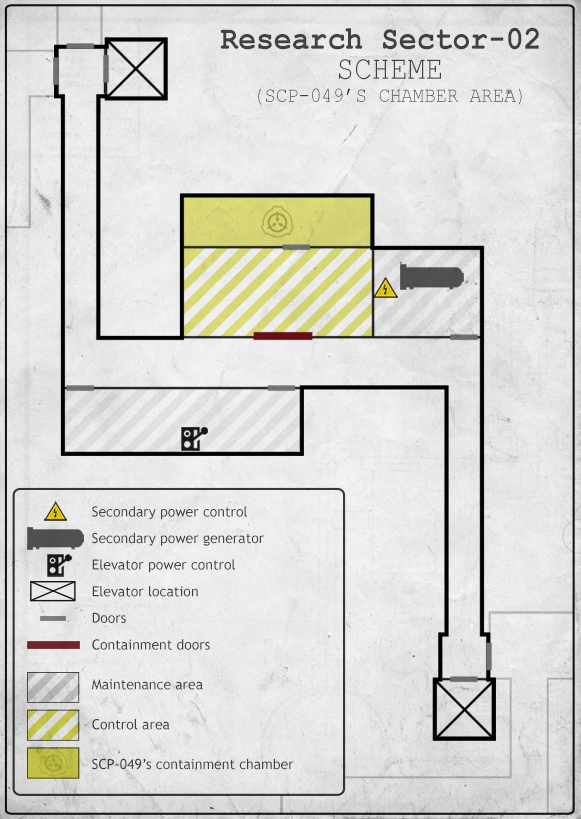
<style>
.page{position:relative;width:581px;height:819px}
.page>*{position:absolute;margin:0}
.t1{font:21.3px/23.1px "CourierNewPSMT";color:#414141;text-transform:uppercase;scale:0.89 1}
.t2{font:33.2px/30.1px "CourierNewPS-BoldMT";color:#414141;scale:0.89 1}
.t3{font:33.2px/30.1px "CourierNewPSMT";color:#414141;text-transform:uppercase;scale:0.89 1}
.t4{font:14px/13.3px "TrebuchetMS";color:#424242}
</style>
<div class="page">
<p class="t1" style="left:220px;top:27px;width:319px;height:78px;text-align:center"><span class="t2">Research Sector-02 </span><span class="t3"><br>scheme<br></span>(SCP-049’s chamber area)</p>
<p class="t4" style="left:91px;top:506px;width:203px;height:264px">Secondary power control<br><br>Secondary power generator<br><br>Elevator power control<br><br>Elevator location<br><br>Doors<br><br>Containment doors<br><br><br>Maintenance area<br><br><br>Control area<br><br><br>SCP-049’s containment chamber</p>
</div>
